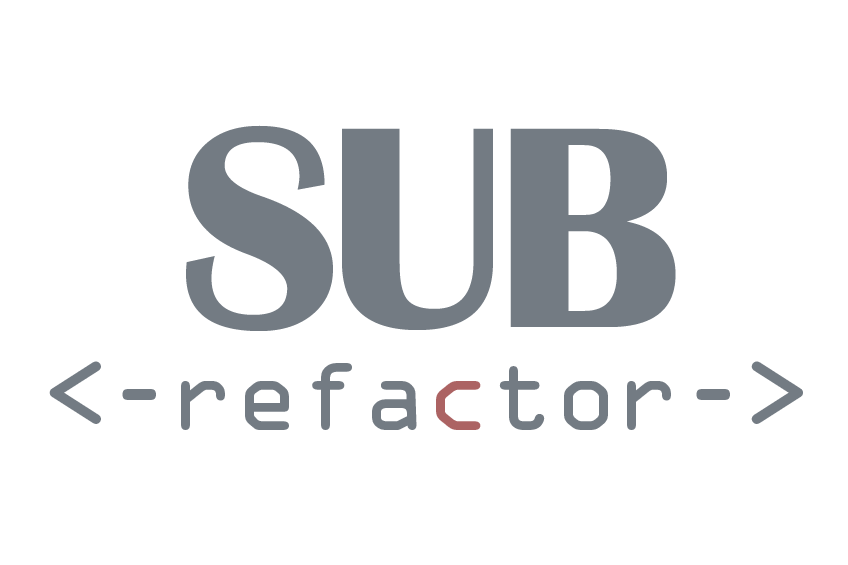
<style>
.page{position:relative;width:848px;height:565px;background:#ffffff}
.page>*{position:absolute;margin:0}
.t1{font:296.8px "BritannicBold";letter-spacing:-0.045em;color:#737b83}
.t2{font:91.1px "OCRAStd";letter-spacing:-0.045em;color:#737b83;scale:1.04 1}
.t3{font:91.1px "OCRAStd";letter-spacing:-0.045em;color:#ac6363;scale:1.04 1}
</style>
<div class="page">
<p class="t1" style="left:186px;top:125px;width:490px;height:206px">SUB</p>
<p class="t2" style="left:49px;top:361px;width:754px;height:69px">&lt;-refa<span class="t3">c</span>tor-&gt;</p>
</div>
